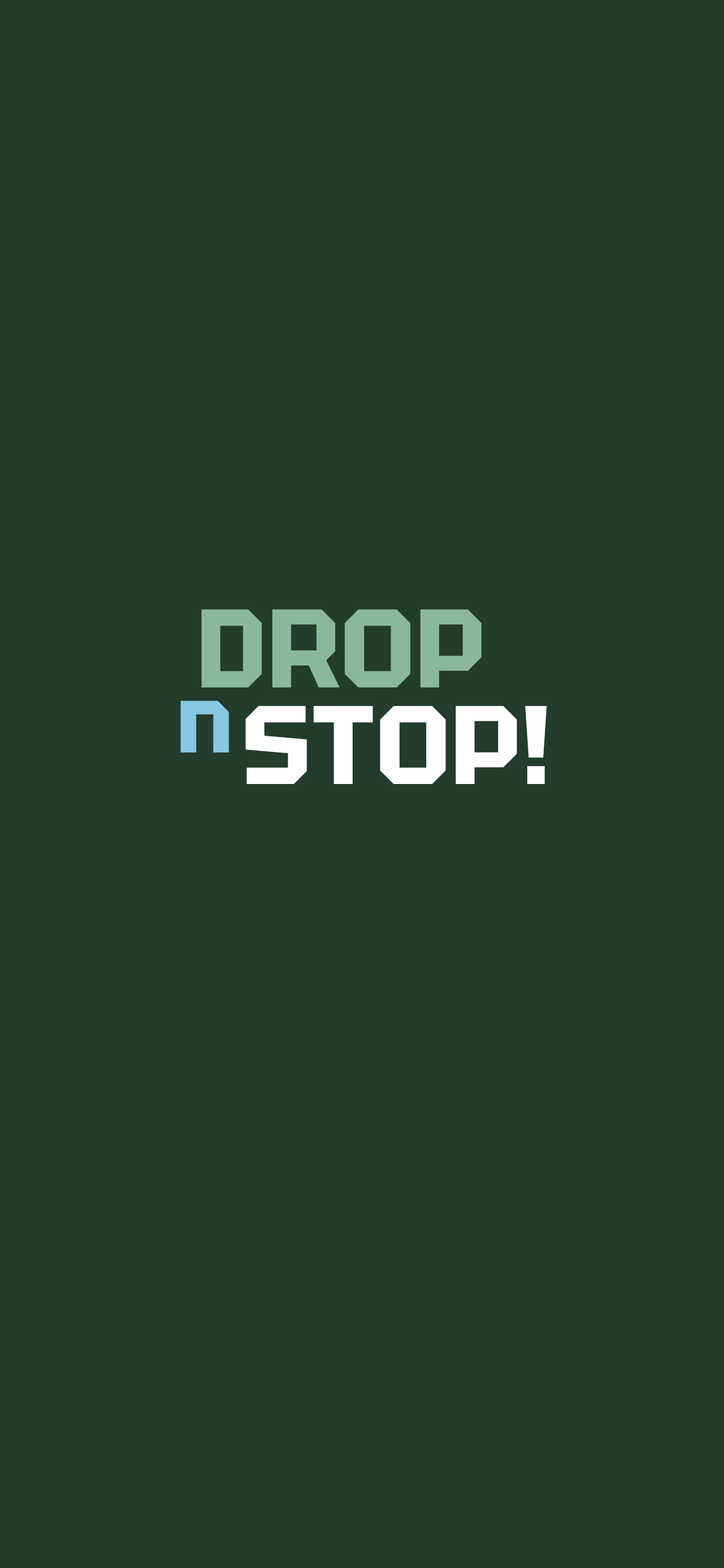
<style>
.page{position:relative;width:724px;height:1568px;background:#233c2b}
.page>*{position:absolute;margin:0}
.t1{font:111.4px "Tektur-Bold";color:#8ab89b}
.t2{font:92px "Tektur-Bold";color:#86c7e1}
.t3{font:111.4px "Tektur-Bold";color:#ffffff}
</style>
<div class="page">
<p class="t1" style="left:201px;top:609px;width:281px;height:78px">DROP</p>
<p class="t2" style="left:180px;top:700px;width:49px;height:52px">n</p>
<p class="t3" style="left:245px;top:705px;width:302px;height:79px">STOP!</p>
</div>
